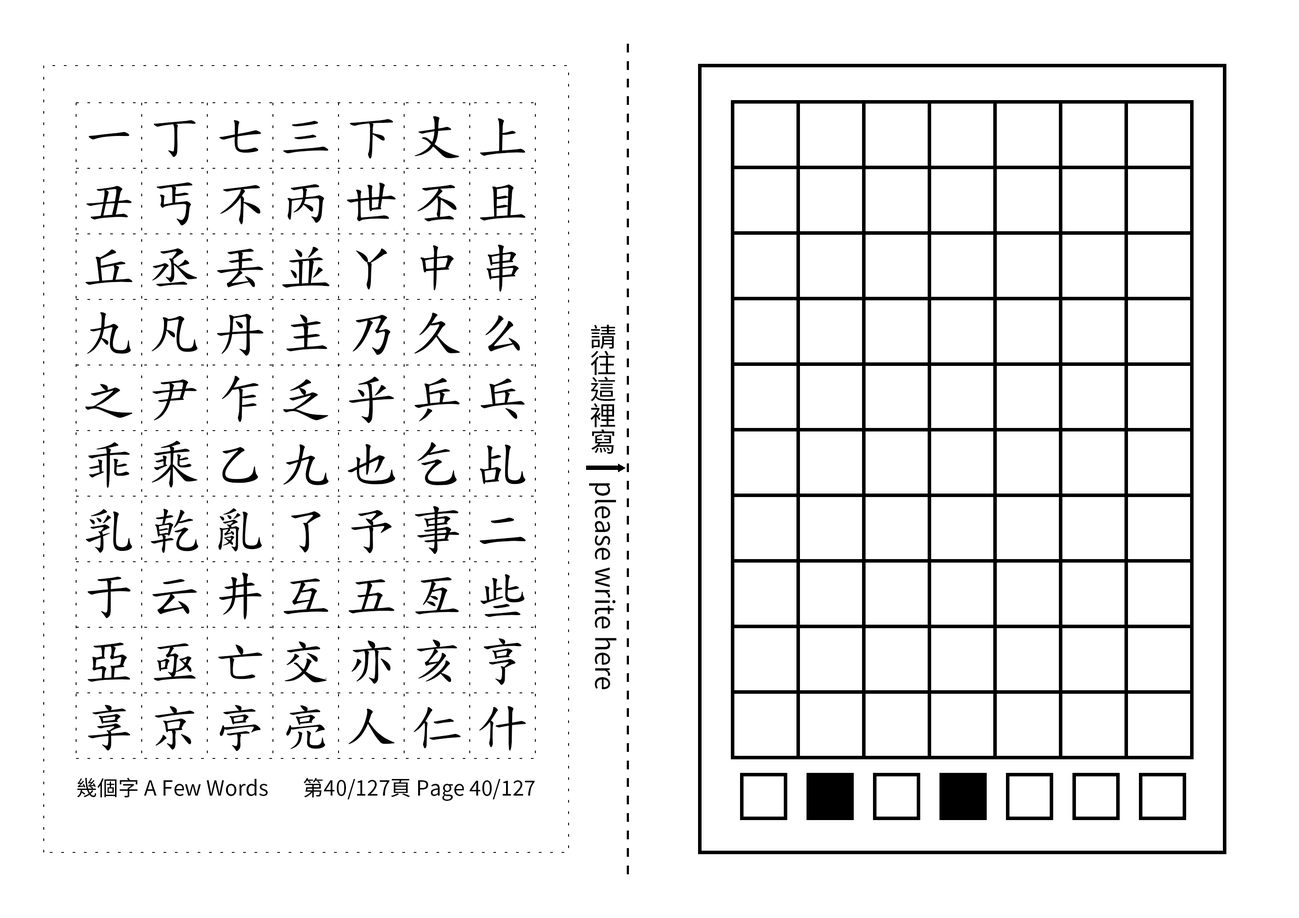
<style>
.page{position:relative;width:1299px;height:918px;background:#ffffff}
.page>*{position:absolute;margin:0}
.t1{font:52.5px/65.6px "TW-Kai-98_1";letter-spacing:0.25em;color:#000000}
.t2{font:26.2px "SourceHanSansTC-Regular";color:#000000}
.t3{font:21px "SourceHanSansTC-Regular";color:#000000}
</style>
<div class="page">
<p class="t1" style="left:85px;top:116px;width:441px;height:636px;text-align:center">一丁七三下丈上丑丐不丙世丕且丘丞丟並丫中串丸凡丹主乃久么之尹乍乏乎乒乓乖乘乙九也乞乩乳乾亂了予事二于云井互五亙些亞亟亡交亦亥亨享京亭亮人仁什</p>
<p class="t2" style="left:589px;top:324px;width:28px;height:366px;text-align:center">請往這裡寫　please write here</p>
<p class="t3" style="left:77px;top:778px;width:191px;height:20px">幾個字 A Few Words</p>
<p class="t3" style="left:303px;top:778px;width:232px;height:23px">第40/127頁 Page 40/127</p>
</div>
